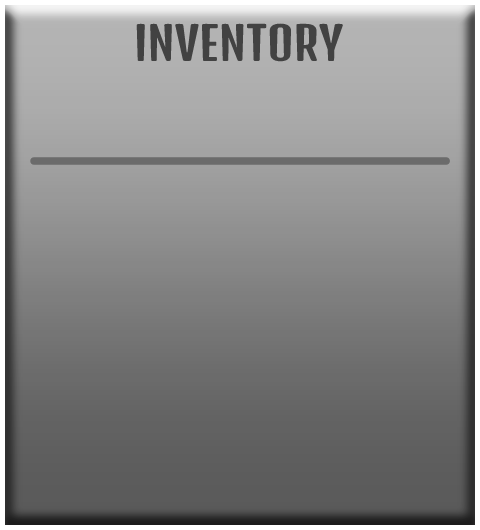
<style>
.page{position:relative;width:480px;height:530px}
.page>*{position:absolute;margin:0}
.t1{font:45px "DenkOne-Regular";color:#424242}
</style>
<div class="page">
<p class="t1" style="left:136px;top:23px;width:207px;height:39px">INVENTORY</p>
</div>
